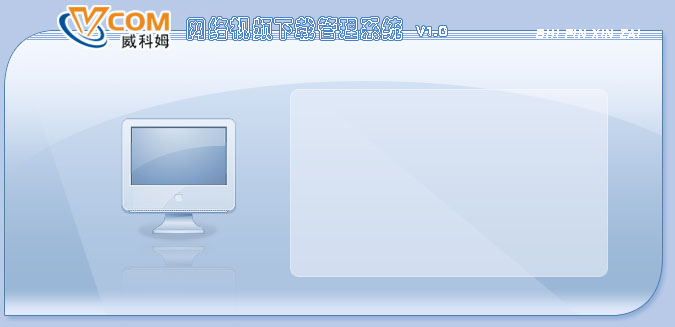
<style>
.page{position:relative;width:675px;height:327px}
.page>*{position:absolute;margin:0}
.t1{font:24px "STCaiyun";letter-spacing:0.085em;color:#ffffff;text-transform:uppercase;scale:0.85 1}
.t2{font:12px "PiliEG-Ultra-GB";letter-spacing:0.085em;color:#ffffff;text-transform:uppercase;scale:0.85 1}
.t3{font:11px "PiliEG-Ultra-GB";letter-spacing:0.065em;color:#ffffff;text-transform:uppercase;font-style:italic;scale:0.85 1}
</style>
<div class="page">
<p class="t1" style="left:187px;top:17px;width:260px;height:23px">网络视频下载管理系统 <span class="t2">V1.0</span></p>
<p class="t3" style="left:536px;top:29px;width:104px;height:9px">shi pin xin zai</p>
</div>
